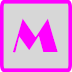
<style>
.page{position:relative;width:72px;height:72px;background:#d7d7d7}
.page>*{position:absolute;margin:0}
.t1{font:48px "Broadway";color:#ff00ff}
</style>
<div class="page">
<p class="t1" style="left:13px;top:18px;width:45px;height:35px">M</p>
</div>
